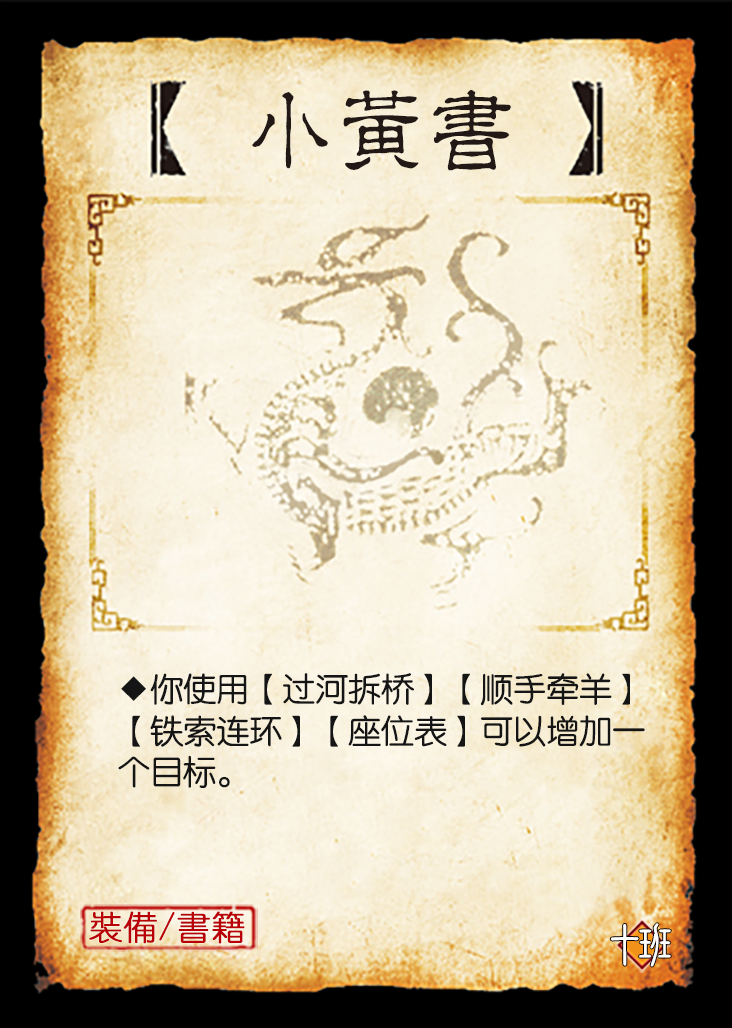
<style>
.page{position:relative;width:732px;height:1028px}
.page>*{position:absolute;margin:0}
.t1{font:95.8px "JMFLS_GBK";color:#221815;scale:0.95 1}
.t2{font:33.3px/41.7px "FZY3JW--GB1-0";letter-spacing:-0.01em;color:#151515}
.t3{font:33.3px "YouYuan";color:#ba0007;font-weight:bold}
.t4{font:50px "DFNewChuan-W5-WINP-BF";letter-spacing:-0.4em;color:#ffffff}
</style>
<div class="page">
<p class="t1" style="left:252px;top:89px;width:259px;height:82px">小黃書</p>
<p class="t2" style="left:118px;top:673px;width:527px;height:115px">◆你使用【过河拆桥】【顺手牵羊】<br>【铁索连环】【座位表】可以增加一<br>个目标。</p>
<p class="t3" style="left:89px;top:911px;width:156px;height:33px">裝備/書籍</p>
<p class="t4" style="left:611px;top:923px;width:60px;height:44px">十班</p>
</div>
